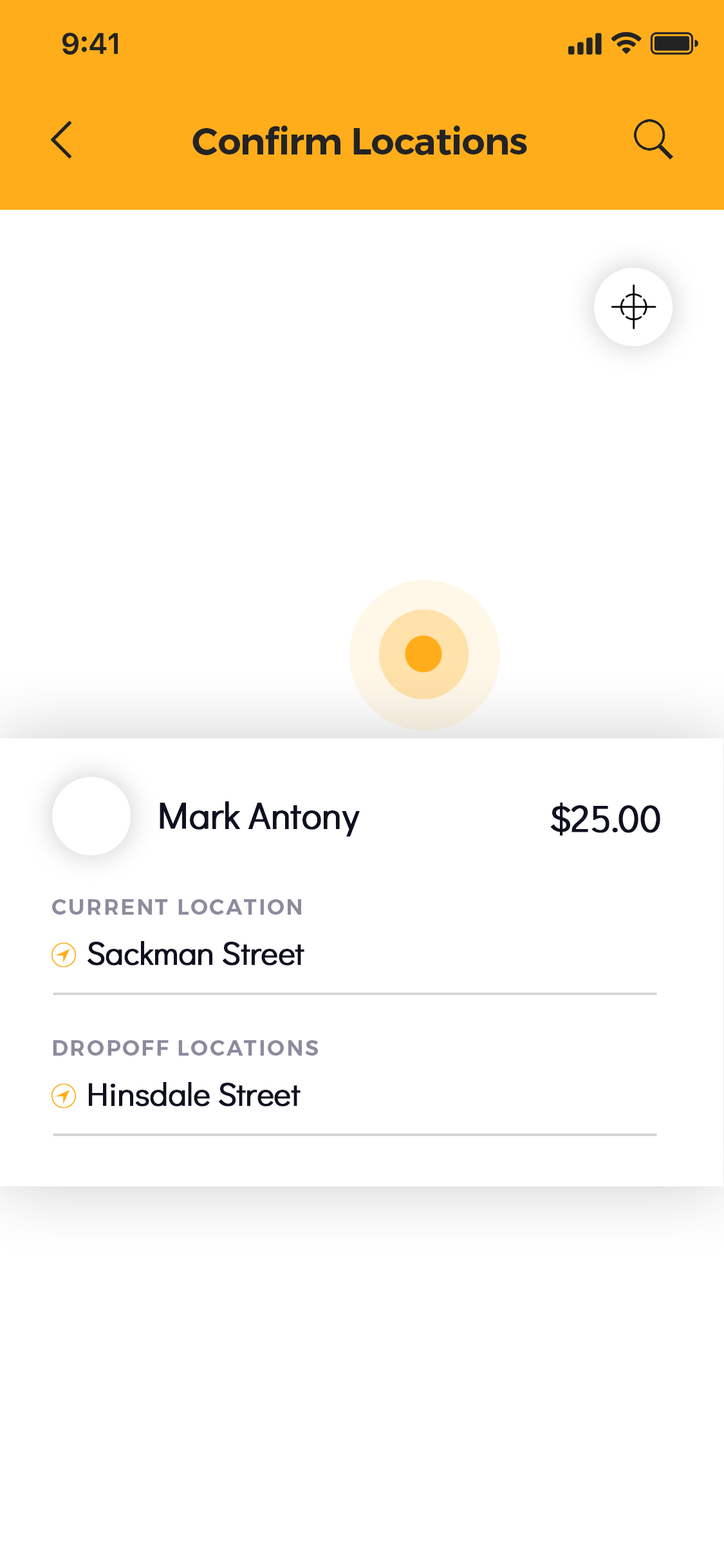
<style>
.page{position:relative;width:724px;height:1568px;background:#ffffff}
.page>*{position:absolute;margin:0}
.t1{font:37.5px "Montserrat-SemiBold";letter-spacing:-0.02em;color:#232323}
.t2{font:37.5px "DidactGothic-Regular";letter-spacing:-0.02em;color:#0e1020;font-weight:bold}
.t3{font:21.5px "Montserrat-SemiBold";letter-spacing:0.08em;color:#8f8b9e;text-transform:uppercase}
.t4{font:32.2px "DidactGothic-Regular";letter-spacing:-0.02em;color:#0e1020;font-weight:bold}
</style>
<div class="page">
<p class="t1" style="left:192px;top:126px;width:335px;height:29px">Confirm Locations</p>
<p class="t2" style="left:160px;top:801px;width:200px;height:36px">Mark Antony</p>
<p class="t2" style="left:550px;top:802px;width:110px;height:33px">$25.00</p>
<p class="t3" style="left:52px;top:899px;width:249px;height:16px">Current location</p>
<p class="t4" style="left:88px;top:941px;width:216px;height:25px">Sackman Street</p>
<p class="t3" style="left:53px;top:1040px;width:265px;height:16px">DROPOFF LOCATIONS</p>
<p class="t4" style="left:89px;top:1082px;width:212px;height:24px">Hinsdale Street</p>
</div>
